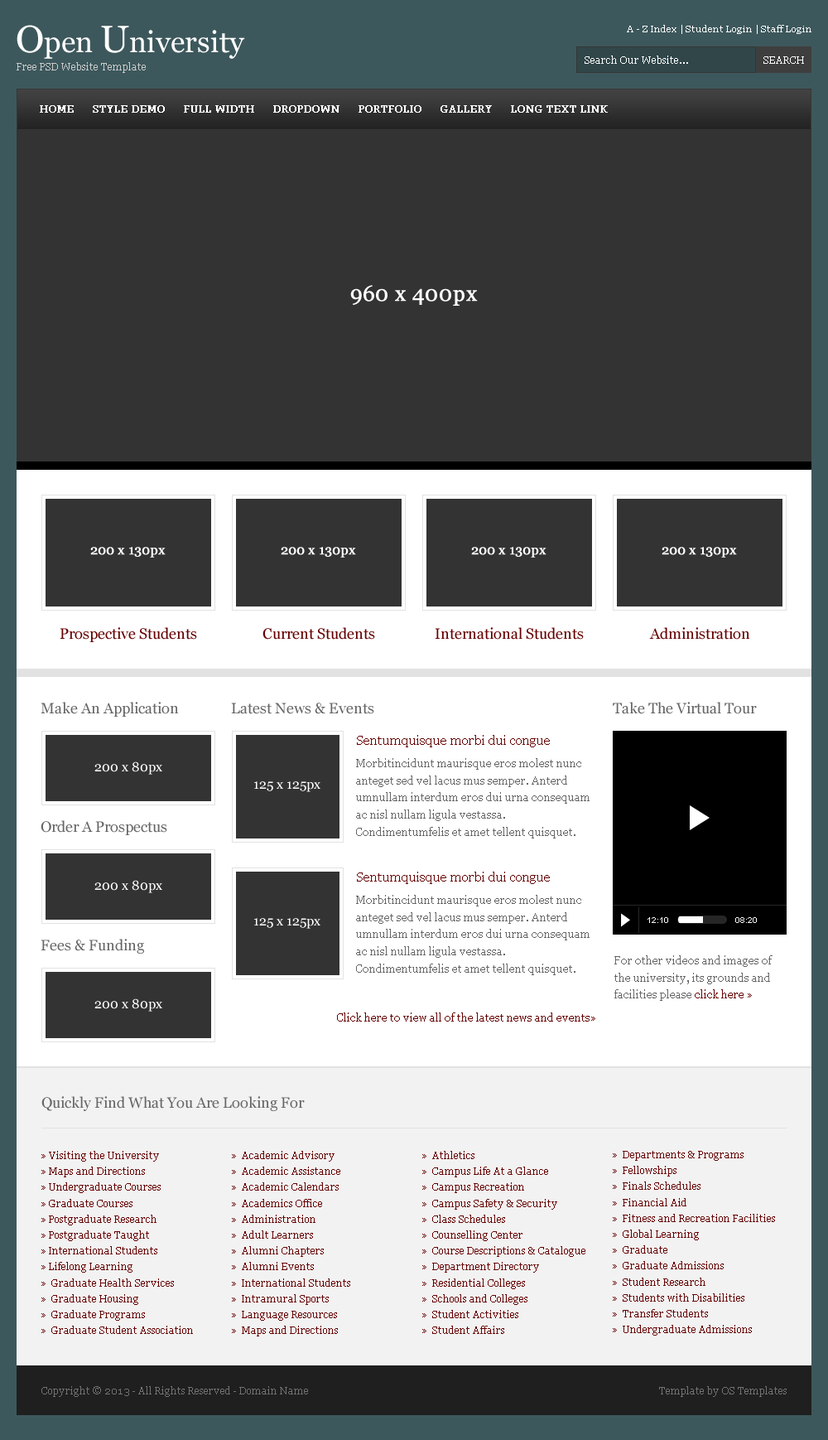
<style>
.page{position:relative;width:828px;height:1440px;background:#333333}
.page>*{position:absolute;margin:0}
.t1{font:29.8px "Georgia";color:#ffffff}
.t2{font:38.1px "Georgia";color:#ffffff}
.t3{font:9.1px "Georgia";color:#fcfcfc}
.t4{font:9.9px "Georgia";color:#cccccc}
.t5{font:9.9px "Georgia";color:#ffffff}
.t6{font:9.9px "Georgia";color:#ffffff;font-weight:bold}
.t7{font:21.5px "Georgia";color:#ffffff;font-weight:bold}
.t8{font:13.3px "Georgia";color:#ffffff;font-weight:bold}
.t9{font:14.9px "Georgia";color:#660000}
.t10{font:14.9px "Georgia";color:#666666}
.t11{font:13.3px "Georgia";color:#660000}
.t12{font:13.3px "Georgia";color:#ffffff}
.t13{font:10.8px/17.2px "Georgia";color:#666666}
.t14{font:8.3px "ArialMT";color:#ffffff}
.t15{font:10.8px/17.2px "Georgia";color:#660000}
.t16{font:10.8px "Georgia";color:#660000}
.t17{font:9.9px/15.9px "Georgia";color:#660000}
.t18{font:9.9px "Georgia";color:#727272}
.t19{font:9.9px "Georgia";color:#737373}
</style>
<div class="page">
<p class="t1" style="left:17px;top:25px;width:228px;height:34px"><span class="t2">O</span>pen <span class="t2">U</span>niversity</p>
<p class="t3" style="left:627px;top:25px;width:185px;height:9px">A - Z Index | Student Login | Staff Login</p>
<p class="t4" style="left:17px;top:62px;width:129px;height:11px">Free PSD Website Template</p>
<p class="t5" style="left:585px;top:55px;width:103px;height:9px">Search Our Website...</p>
<p class="t5" style="left:764px;top:56px;width:40px;height:8px">SEARCH</p>
<p class="t6" style="left:40px;top:105px;width:34px;height:8px">HOME</p>
<p class="t6" style="left:93px;top:105px;width:72px;height:8px">STYLE DEMO</p>
<p class="t6" style="left:184px;top:105px;width:70px;height:8px">FULL WIDTH</p>
<p class="t6" style="left:273px;top:105px;width:67px;height:8px">DROPDOWN</p>
<p class="t6" style="left:359px;top:105px;width:63px;height:8px">PORTFOLIO</p>
<p class="t6" style="left:441px;top:105px;width:51px;height:8px">GALLERY</p>
<p class="t6" style="left:511px;top:105px;width:97px;height:8px">LONG TEXT LINK</p>
<p class="t7" style="left:350px;top:285px;width:128px;height:21px">960 x 400px</p>
<p class="t8" style="left:90px;top:547px;width:76px;height:10px">200 x 130px</p>
<p class="t8" style="left:281px;top:547px;width:75px;height:10px">200 x 130px</p>
<p class="t8" style="left:471px;top:547px;width:76px;height:10px">200 x 130px</p>
<p class="t8" style="left:662px;top:547px;width:75px;height:10px">200 x 130px</p>
<p class="t9" style="left:60px;top:627px;width:137px;height:15px">Prospective Students</p>
<p class="t9" style="left:263px;top:627px;width:112px;height:12px">Current Students</p>
<p class="t9" style="left:435px;top:627px;width:149px;height:12px">International Students</p>
<p class="t9" style="left:649px;top:627px;width:101px;height:12px">Administration</p>
<p class="t10" style="left:41px;top:702px;width:138px;height:14px">Make An Application</p>
<p class="t10" style="left:613px;top:702px;width:144px;height:12px">Take The Virtual Tour</p>
<p class="t10" style="left:231px;top:702px;width:143px;height:12px">Latest News &amp; Events</p>
<p class="t11" style="left:357px;top:735px;width:193px;height:12px">Sentumquisque morbi dui congue</p>
<p class="t12" style="left:94px;top:761px;width:68px;height:13px">200 x 80px</p>
<p class="t13" style="left:356px;top:758px;width:234px;height:80px">Morbitincidunt maurisque eros molest nunc anteget sed vel lacus mus semper. Anterd umnullam interdum eros dui urna consequam ac nisl nullam ligula vestassa. Condimentumfelis et amet tellent quisquet.</p>
<p class="t12" style="left:254px;top:781px;width:67px;height:11px">125 x 125px</p>
<p class="t10" style="left:41px;top:820px;width:126px;height:15px">Order A Prospectus</p>
<p class="t12" style="left:94px;top:880px;width:68px;height:13px">200 x 80px</p>
<p class="t11" style="left:357px;top:871px;width:193px;height:13px">Sentumquisque morbi dui congue</p>
<p class="t13" style="left:356px;top:895px;width:234px;height:80px">Morbitincidunt maurisque eros molest nunc anteget sed vel lacus mus semper. Anterd umnullam interdum eros dui urna consequam ac nisl nullam ligula vestassa. Condimentumfelis et amet tellent quisquet.</p>
<p class="t12" style="left:254px;top:918px;width:67px;height:11px">125 x 125px</p>
<p class="t14" style="left:648px;top:917px;width:20px;height:6px">12:10</p>
<p class="t14" style="left:736px;top:917px;width:21px;height:6px">08:20</p>
<p class="t10" style="left:41px;top:938px;width:103px;height:15px">Fees &amp; Funding</p>
<p class="t13" style="left:615px;top:955px;width:158px;height:46px">For other videos and images of the university, its grounds and facilities please<span class="t15"> click here »</span></p>
<p class="t12" style="left:94px;top:998px;width:68px;height:13px">200 x 80px</p>
<p class="t16" style="left:337px;top:1012px;width:259px;height:9px">Click here to view all of the latest news and events»</p>
<p class="t10" style="left:41px;top:1096px;width:264px;height:15px">Quickly Find What You Are Looking For</p>
<p class="t17" style="left:41px;top:1151px;width:152px;height:183px">» Visiting the University<br>» Maps and Directions<br>» Undergraduate Courses<br>» Graduate Courses<br>» Postgraduate Research<br>» Postgraduate Taught<br>» International Students<br>» Lifelong Learning<br>»  Graduate Health Services<br>»  Graduate Housing<br>»  Graduate Programs<br>»  Graduate Student Association</p>
<p class="t17" style="left:232px;top:1151px;width:118px;height:185px">»  Academic Advisory<br>»  Academic Assistance<br>»  Academic Calendars<br>»  Academics Office<br>»  Administration<br>»  Adult Learners<br>»  Alumni Chapters<br>»  Alumni Events<br>»  International Students<br>»  Intramural Sports<br>»  Language Resources<br>»  Maps and Directions</p>
<p class="t17" style="left:422px;top:1151px;width:164px;height:183px">»  Athletics<br>»  Campus Life At a Glance<br>»  Campus Recreation<br>»  Campus Safety &amp; Security<br>»  Class Schedules<br>»  Counselling Center<br>»  Course Descriptions &amp; Catalogue<br>»  Department Directory<br>»  Residential Colleges<br>»  Schools and Colleges<br>»  Student Activities<br>»  Student Affairs</p>
<p class="t17" style="left:613px;top:1151px;width:162px;height:184px">»  Departments &amp; Programs<br>»  Fellowships<br>»  Finals Schedules<br>»  Financial Aid<br>»  Fitness and Recreation Facilities<br>»  Global Learning<br>»  Graduate<br>»  Graduate Admissions<br>»  Student Research<br>»  Students with Disabilities<br>»  Transfer Students<br>»  Undergraduate Admissions</p>
<p class="t18" style="left:41px;top:1386px;width:267px;height:11px">Copyright © 2013 - All Rights Reserved - Domain Name</p>
<p class="t19" style="left:659px;top:1386px;width:128px;height:11px">Template by OS Templates</p>
</div>
